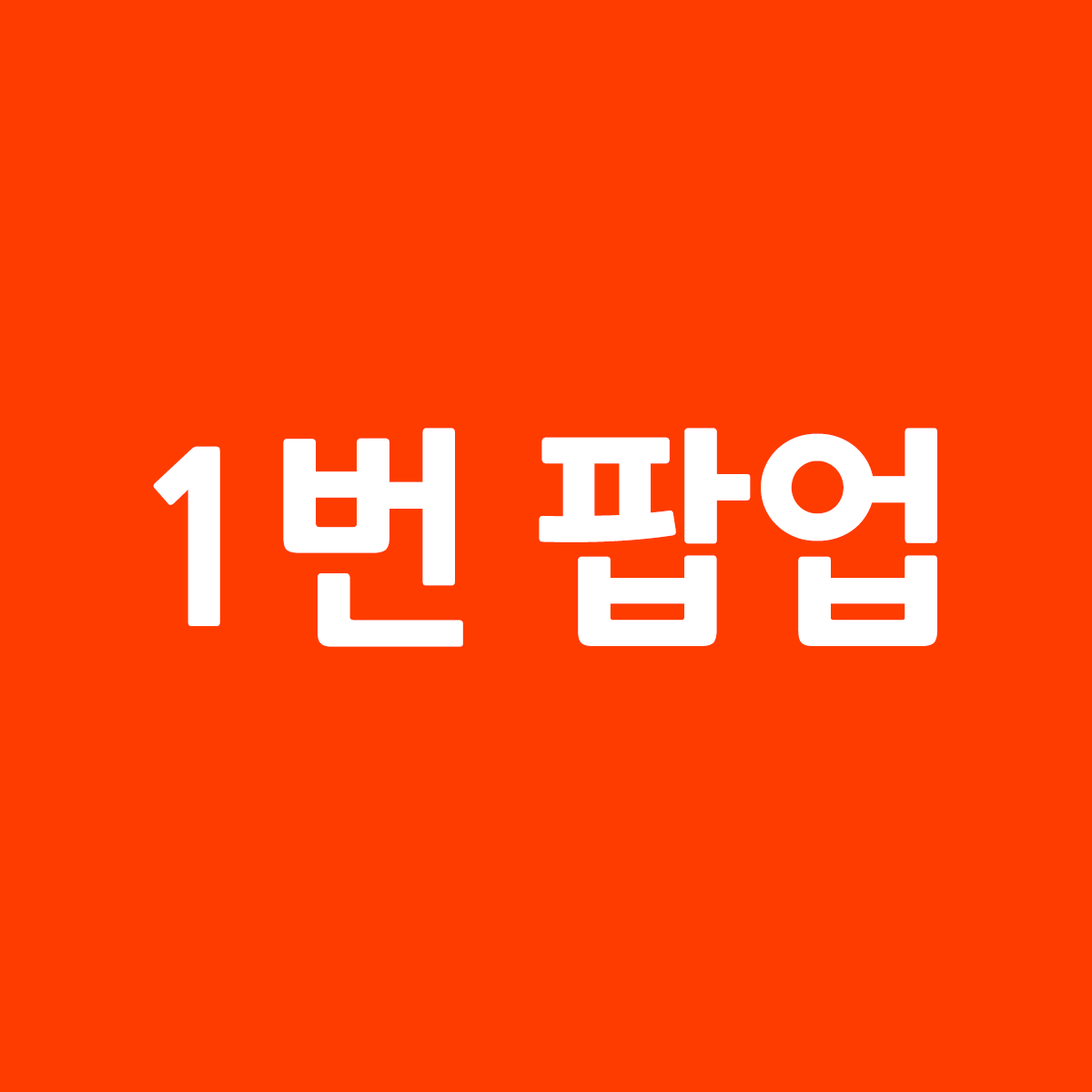
<style>
.page{position:relative;width:1092px;height:1092px;background:#ff3c00}
.page>*{position:absolute;margin:0}
.t1{font:231.3px "NanumGothicExtraBold";letter-spacing:-0.025em;color:#ffffff}
</style>
<div class="page">
<p class="t1" style="left:134px;top:428px;width:803px;height:219px">4번 팝업</p>
<p class="t1" style="left:141px;top:428px;width:796px;height:219px">2번 팝업</p>
<p class="t1" style="left:142px;top:428px;width:795px;height:219px">3번 팝업</p>
<p class="t1" style="left:153px;top:428px;width:784px;height:219px">1번 팝업</p>
</div>
